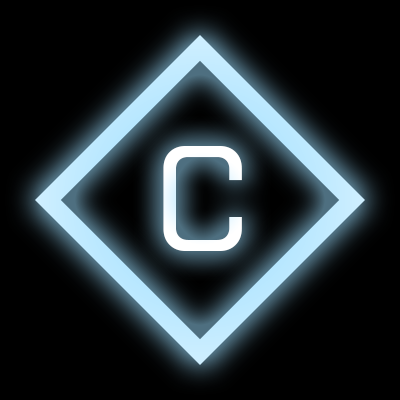
<style>
.page{position:relative;width:400px;height:400px;background:#000000}
.page>*{position:absolute;margin:0}
.t1{font:150px "Purista";color:#ffffff}
</style>
<div class="page">
<p class="t1" style="left:163px;top:146px;width:79px;height:105px">C</p>
</div>
